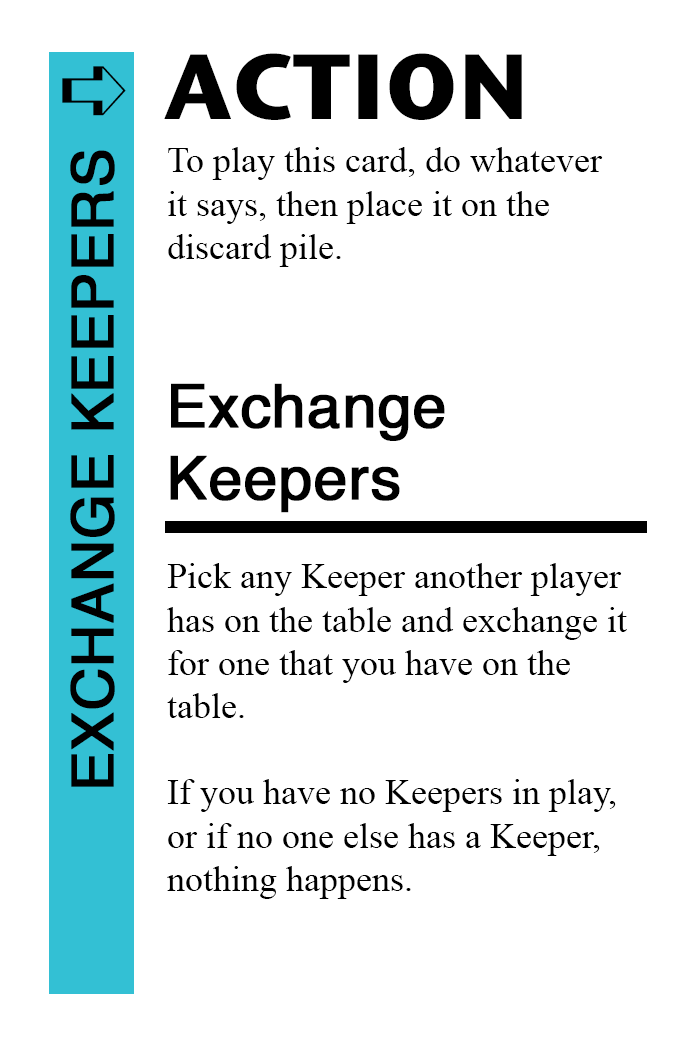
<style>
.page{position:relative;width:700px;height:1042px;background:#ffffff}
.page>*{position:absolute;margin:0}
.t1{font:92px "StoneSansITC-Bold";color:#000000}
.t2{font:82px "MS-Gothic";color:#000000}
.t3{font:58px "Helvetica";color:#000000;font-weight:bold}
.t4{font:36px "TimesNewRomanPSMT";color:#000000}
.t5{font:60px "Helvetica";color:#000000;font-weight:bold}
</style>
<div class="page">
<p class="t1" style="left:164px;top:53px;width:358px;height:67px">ACTION</p>
<p class="t2" style="left:62px;top:66px;width:64px;height:50px">➪</p>
<p class="t3" style="left:70px;top:150px;width:45px;height:637px;rotate:-90deg">EXCHANGE KEEPERS</p>
<p class="t4" style="left:168px;top:147px;width:435px;height:120px">To play this card, do whatever<br>it says, then place it on the<br>discard pile.</p>
<p class="t5" style="left:170px;top:383px;width:275px;height:130px">Exchange<br>Keepers</p>
<p class="t4" style="left:167px;top:563px;width:460px;height:336px">Pick any Keeper another player<br>has on the table and exchange it<br>for one that you have on the<br>table.<br><br>If you have no Keepers in play,<br>or if no one else has a Keeper,<br>nothing happens.</p>
</div>
